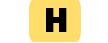
<style>
.page{position:relative;width:108px;height:43px;background:#ffffff}
.page>*{position:absolute;margin:0}
.t1{font:36px "FranklinGothic-Heavy";color:#000000}
</style>
<div class="page">
<p class="t1" style="left:46px;top:8px;width:21px;height:24px">H</p>
</div>
